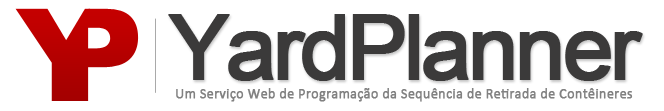
<style>
.page{position:relative;width:664px;height:111px;background:#ffffff}
.page>*{position:absolute;margin:0}
.t1{font:90px "ArialMT";letter-spacing:-0.06em;color:#3b3a3a;font-weight:bold}
.t2{font:14px "Calibri";letter-spacing:0.005em;color:#818181;font-weight:bold}
</style>
<div class="page">
<p class="t1" style="left:168px;top:14px;width:475px;height:67px">YardPlanner</p>
<p class="t2" style="left:176px;top:88px;width:457px;height:14px">Um Serviço Web de Programação da Sequência de Retirada de Contêineres</p>
</div>
